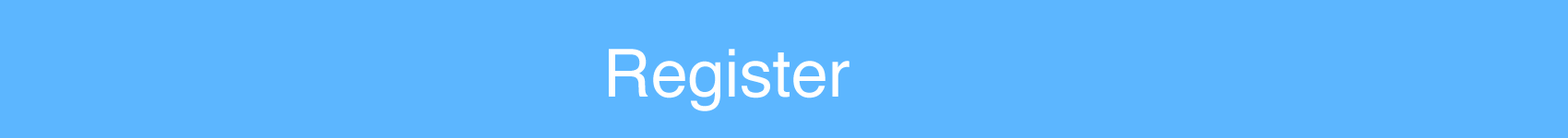
<style>
.page{position:relative;width:1568px;height:138px;background:#5cb6ff}
.page>*{position:absolute;margin:0}
.t1{font:66.4px "Helvetica";color:#ffffff}
</style>
<div class="page">
<p class="t1" style="left:609px;top:49px;width:240px;height:63px">Register</p>
</div>
